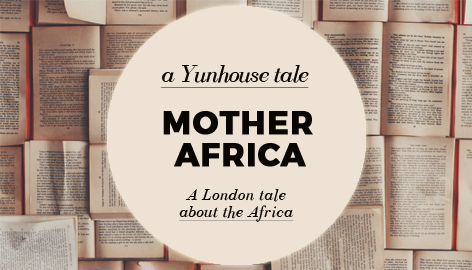
<style>
.page{position:relative;width:472px;height:270px;background:#eee2d5}
.page>*{position:absolute;margin:0}
.t1{font:25px "BodoniFLF-Italic";letter-spacing:-0.04em;color:#090500;text-decoration:underline}
.t2{font:31.8px "Montserrat-Bold";letter-spacing:0.02em;color:#090500;text-transform:uppercase;font-weight:bold}
.t3{font:16.7px "BodoniFLF-Italic";letter-spacing:0.02em;color:#090500}
.t4{font:16.7px "BodoniFLF-Italic";letter-spacing:0.02em;color:#090500;text-decoration:underline}
</style>
<div class="page">
<p class="t1" style="left:161px;top:65px;width:148px;height:23px">a Yunhouse tale</p>
<p class="t2" style="left:163px;top:111px;width:150px;height:24px">mother</p>
<p class="t2" style="left:174px;top:143px;width:132px;height:24px">africa</p>
<p class="t3" style="left:185px;top:189px;width:101px;height:13px">A London tale</p>
<p class="t4" style="left:179px;top:205px;width:115px;height:17px">about the Africa</p>
</div>
